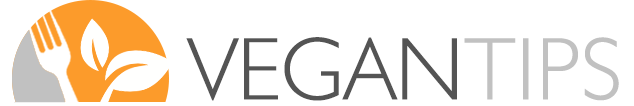
<style>
.page{position:relative;width:634px;height:106px;background:#ffffff}
.page>*{position:absolute;margin:0}
.t1{font:89.4px "Humanist521BT-Light";color:#545454}
.t2{font:89.4px "Humanist521BT-Light";color:#c1c1c1}
</style>
<div class="page">
<p class="t1" style="left:186px;top:37px;width:433px;height:64px">VEGAN<span class="t2">TIPS</span></p>
</div>
